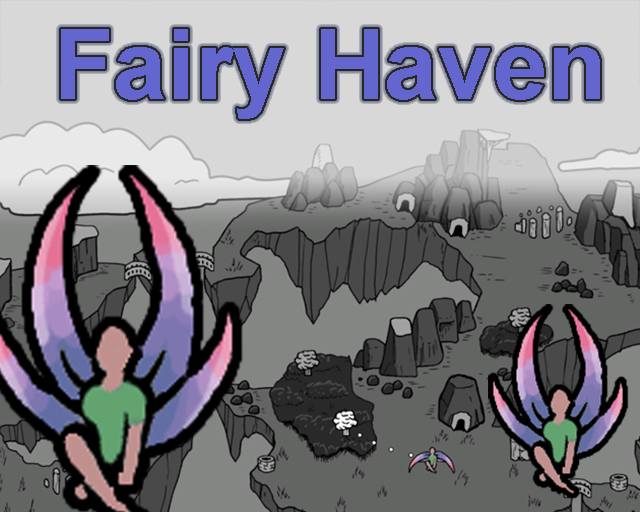
<style>
.page{position:relative;width:640px;height:512px;background:#d7d8d7}
.page>*{position:absolute;margin:0}
.t1{font:98.3px "Arial-BoldMT";color:#6466cf}
</style>
<div class="page">
<p class="t1" style="left:61px;top:29px;width:539px;height:90px">Fairy Haven</p>
</div>
